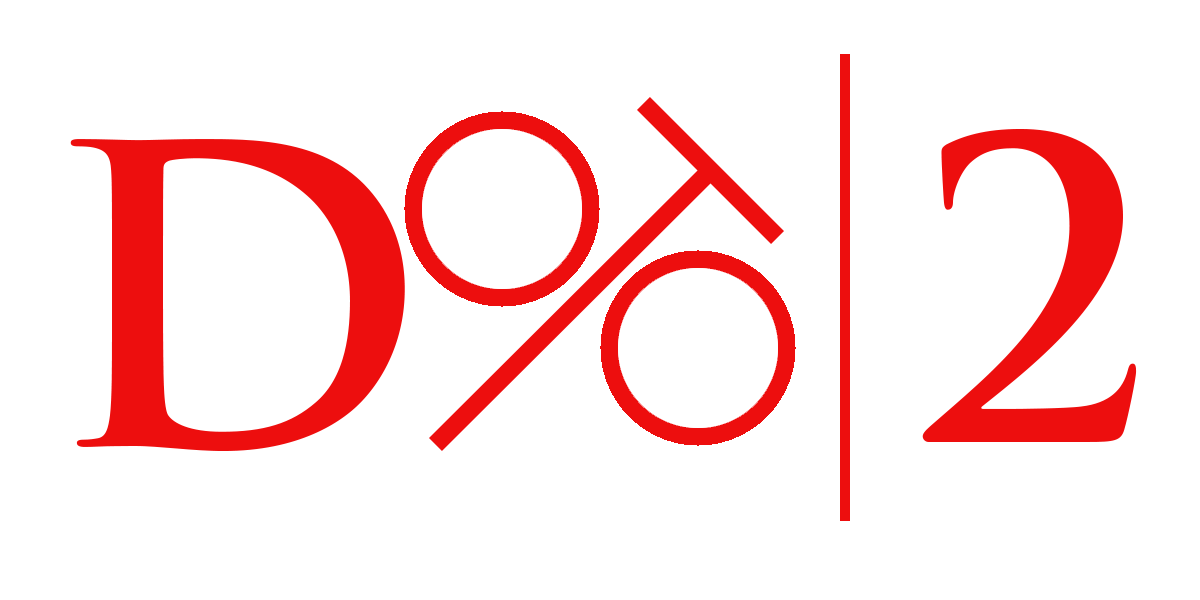
<style>
.page{position:relative;width:1200px;height:600px;background:#ffffff}
.page>*{position:absolute;margin:0}
.t1{font:408.3px "TrajanPro-Bold";color:#ed0e0e}
</style>
<div class="page">
<p class="t1" style="left:922px;top:129px;width:215px;height:313px">2</p>
<p class="t1" style="left:70px;top:139px;width:335px;height:312px">D</p>
</div>
